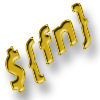
<style>
.page{position:relative;width:100px;height:100px;background:#ffffff}
.page>*{position:absolute;margin:0}
.t1{font:49.3px "ErasITC-Bold";font-weight:bold;scale:0.78 1}
</style>
<div class="page">
<p class="t1" style="left:5px;top:2px;width:86px;height:92px;rotate:-38deg">${fn}</p>
</div>
